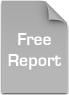
<style>
.page{position:relative;width:69px;height:95px}
.page>*{position:absolute;margin:0}
.t1{font:18px "Eurose";color:#ffffff}
</style>
<div class="page">
<p class="t1" style="left:8px;top:33px;width:53px;height:37px;text-align:center">Free Report</p>
</div>
